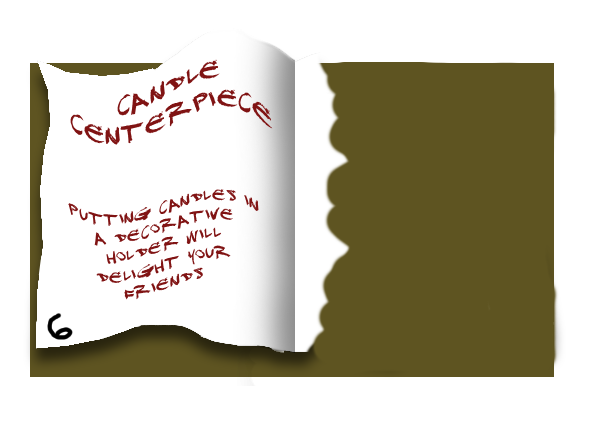
<style>
.page{position:relative;width:591px;height:427px;background:#ffffff}
.page>*{position:absolute;margin:0}
.t1{font:25px "DJ-Gross";color:#801313}
.t2{font:16px "DJ-Gross";color:#801313}
</style>
<div class="page">
<p class="t1" style="left:70px;top:59px;width:203px;height:86px;text-align:center">Candle<br>Centerpiece</p>
<p class="t2" style="left:68px;top:189px;width:191px;height:111px;text-align:center">Putting candles in a decorative holder will delight your friends</p>
</div>
